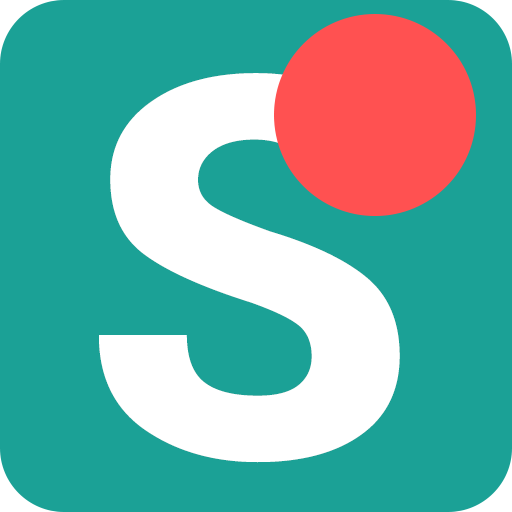
<style>
.page{position:relative;width:512px;height:512px;background:#1ba196}
.page>*{position:absolute;margin:0}
.t1{font:531.5px "Roboto-Black";color:#ffffff}
</style>
<div class="page">
<p class="t1" style="left:99px;top:73px;width:301px;height:390px">S</p>
</div>
